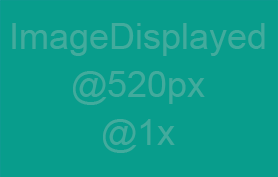
<style>
.page{position:relative;width:278px;height:177px;background:#089d8c}
.page>*{position:absolute;margin:0}
.t1{font:36px/48px "ArialMT";color:#42ab9d}
</style>
<div class="page">
<p class="t1" style="left:12px;top:23px;width:253px;height:130px;text-align:center">ImageDisplayed<br>@520px<br>@1x</p>
</div>
